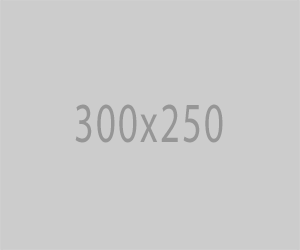
<style>
.page{position:relative;width:300px;height:250px;background:#cccccc}
.page>*{position:absolute;margin:0}
.t1{font:57px "MyriadPro-Regular";letter-spacing:0.07em;color:#969696;scale:0.68 1}
</style>
<div class="page">
<p class="t1" style="left:75px;top:104px;width:148px;height:39px">300x250</p>
</div>
